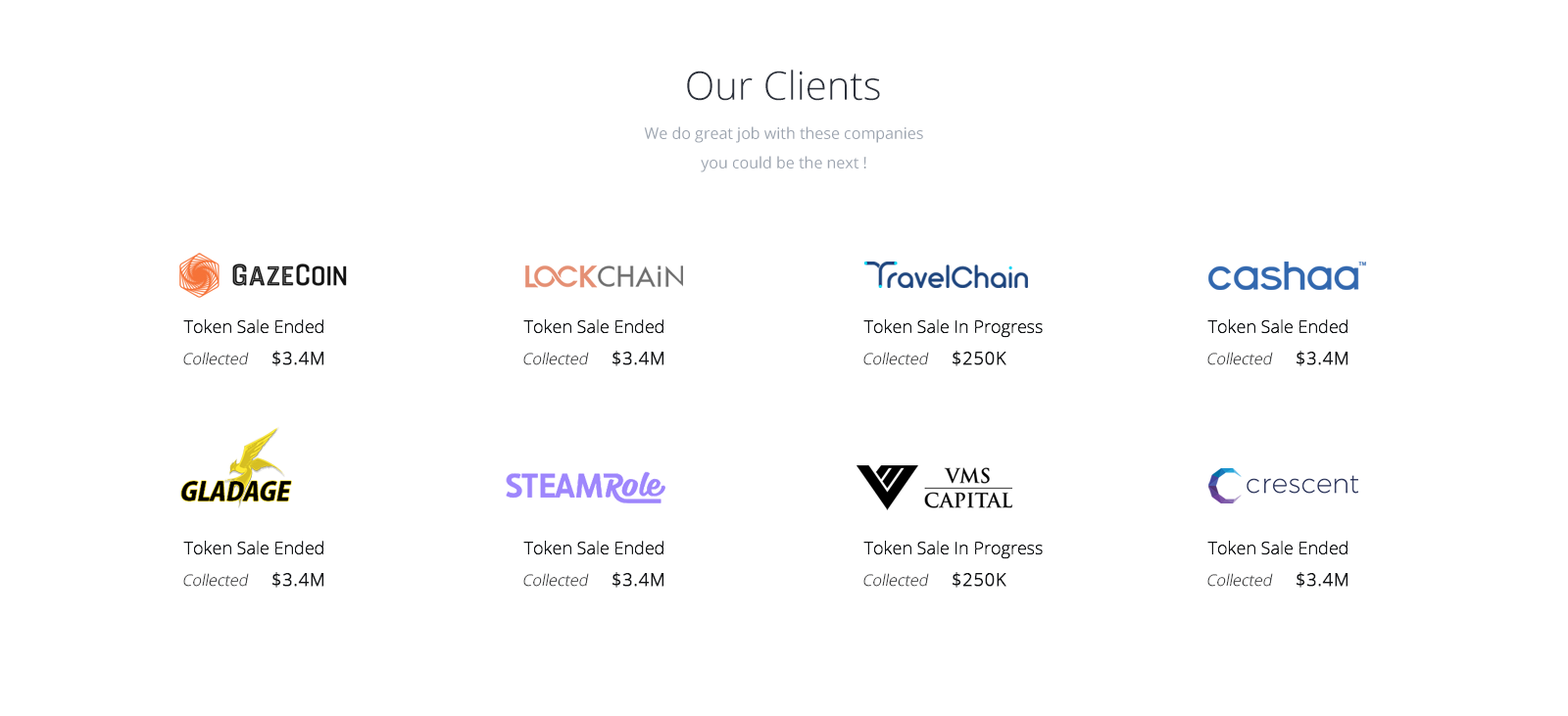
<style>
.page{position:relative;width:1568px;height:716px;background:#ffffff}
.page>*{position:absolute;margin:0}
.t1{font:39.2px "OpenSans-Light";color:#2b303b}
.t2{font:15.7px/29.4px "OpenSans";color:#9da5b0}
.t3{font:17.6px "OpenSans-Light";color:#111316}
.t4{font:15.7px "OpenSans-Light";font-style:italic}
.t5{font:17.6px "OpenSans-Light";color:#111316;font-weight:bold}
</style>
<div class="page">
<p class="t1" style="left:687px;top:70px;width:193px;height:31px">Our Clients</p>
<p class="t2" style="left:644px;top:126px;width:279px;height:46px;text-align:center">We do great job with these companies <br>you could be the next !</p>
<p class="t3" style="left:183px;top:319px;width:140px;height:15px">Token Sale Ended</p>
<p class="t3" style="left:523px;top:319px;width:140px;height:15px">Token Sale Ended</p>
<p class="t3" style="left:863px;top:319px;width:180px;height:19px">Token Sale In Progress</p>
<p class="t3" style="left:1207px;top:319px;width:141px;height:15px">Token Sale Ended</p>
<p class="t4" style="left:183px;top:352px;width:66px;height:14px">Collected</p>
<p class="t5" style="left:272px;top:351px;width:52px;height:16px">$3.4M</p>
<p class="t4" style="left:523px;top:352px;width:66px;height:14px">Collected</p>
<p class="t5" style="left:612px;top:351px;width:52px;height:16px">$3.4M</p>
<p class="t4" style="left:863px;top:352px;width:66px;height:14px">Collected</p>
<p class="t5" style="left:953px;top:351px;width:53px;height:16px">$250K</p>
<p class="t4" style="left:1207px;top:352px;width:66px;height:14px">Collected</p>
<p class="t5" style="left:1297px;top:351px;width:51px;height:16px">$3.4M</p>
<p class="t3" style="left:183px;top:541px;width:140px;height:15px">Token Sale Ended</p>
<p class="t3" style="left:523px;top:541px;width:140px;height:15px">Token Sale Ended</p>
<p class="t3" style="left:863px;top:541px;width:180px;height:19px">Token Sale In Progress</p>
<p class="t3" style="left:1207px;top:541px;width:141px;height:15px">Token Sale Ended</p>
<p class="t4" style="left:183px;top:573px;width:66px;height:14px">Collected</p>
<p class="t5" style="left:272px;top:572px;width:52px;height:16px">$3.4M</p>
<p class="t4" style="left:523px;top:573px;width:66px;height:14px">Collected</p>
<p class="t5" style="left:612px;top:572px;width:52px;height:16px">$3.4M</p>
<p class="t4" style="left:863px;top:573px;width:66px;height:14px">Collected</p>
<p class="t5" style="left:953px;top:572px;width:53px;height:16px">$250K</p>
<p class="t4" style="left:1207px;top:573px;width:66px;height:14px">Collected</p>
<p class="t5" style="left:1297px;top:572px;width:51px;height:16px">$3.4M</p>
</div>
